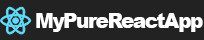
<style>
.page{position:relative;width:204px;height:40px;background:#222222}
.page>*{position:absolute;margin:0}
.t1{font:20px "Arial-Black";letter-spacing:-0.075em;color:#ffffff}
</style>
<div class="page">
<p class="t1" style="left:36px;top:13px;width:167px;height:19px">MyPureReactApp</p>
</div>
